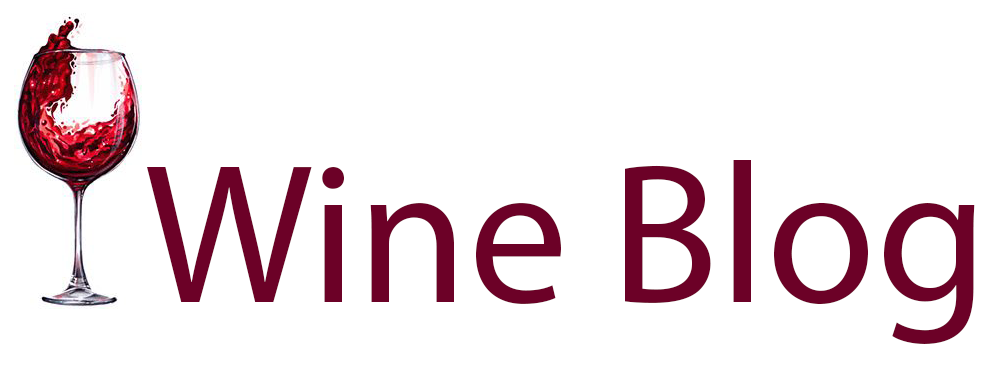
<style>
.page{position:relative;width:1000px;height:383px;background:#ffffff}
.page>*{position:absolute;margin:0}
.t1{font:200px "MyriadPro-Regular";color:#6c0127}
</style>
<div class="page">
<p class="t1" style="left:147px;top:160px;width:828px;height:184px">Wine Blog</p>
</div>
